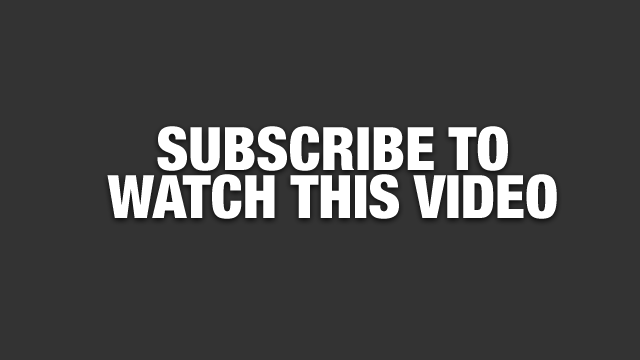
<style>
.page{position:relative;width:640px;height:360px;background:#333333}
.page>*{position:absolute;margin:0}
.t1{font:60px/48px "HelveticaNeue-CondensedBlack";color:#ffffff;text-transform:uppercase}
</style>
<div class="page">
<p class="t1" style="left:107px;top:126px;width:450px;height:93px;text-align:center">Subscribe to<br>watch this video</p>
</div>
